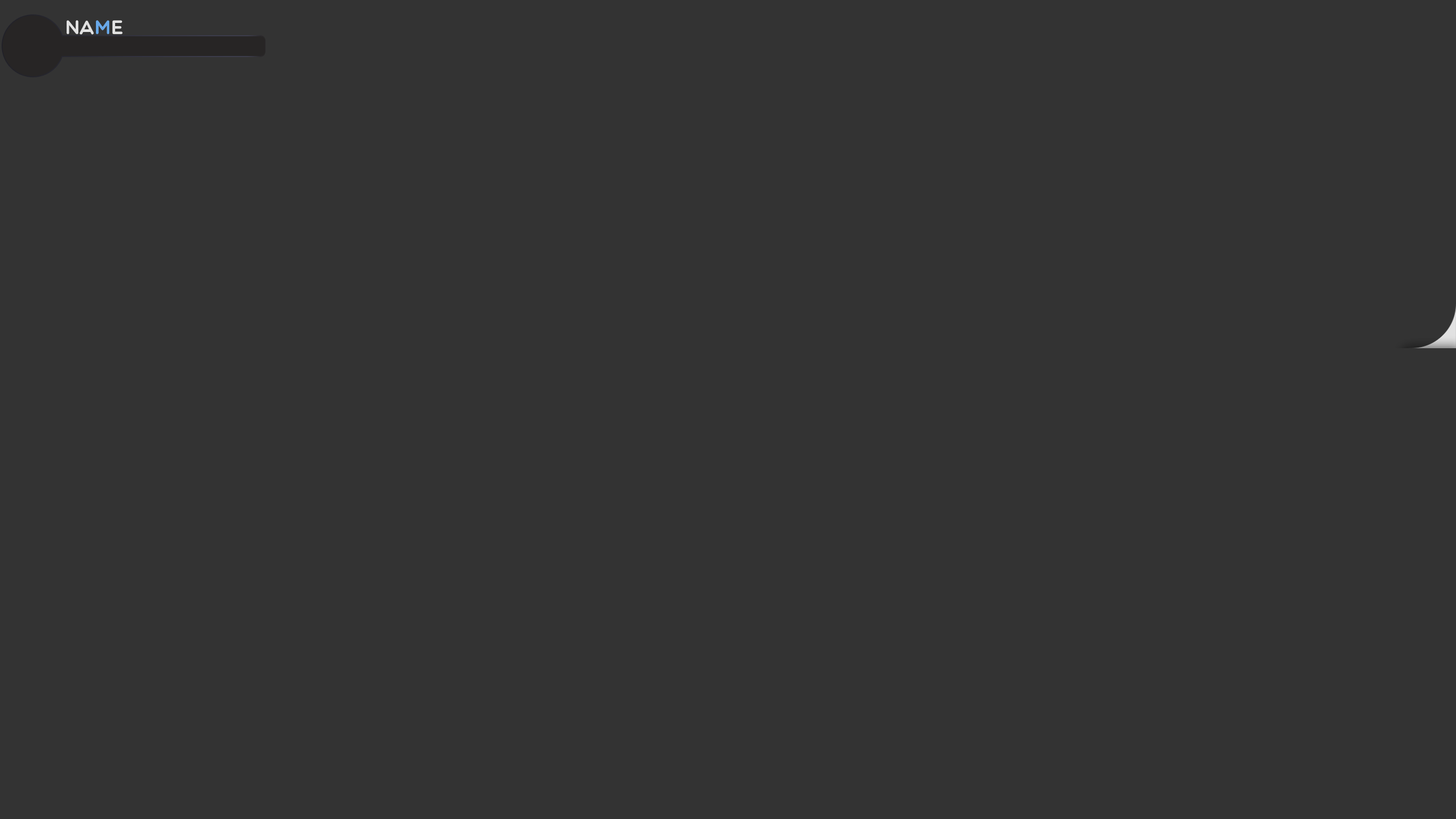
<style>
.page{position:relative;width:1456px;height:819px;background:#333333}
.page>*{position:absolute;margin:0}
.t1{font:19.7px "Multicolore";color:#e1e1e1}
.t2{font:19.7px "Multicolore";color:#68a8e9}
</style>
<div class="page">
<p class="t1" style="left:67px;top:20px;width:56px;height:15px">Na<span class="t2">m</span>e</p>
</div>
